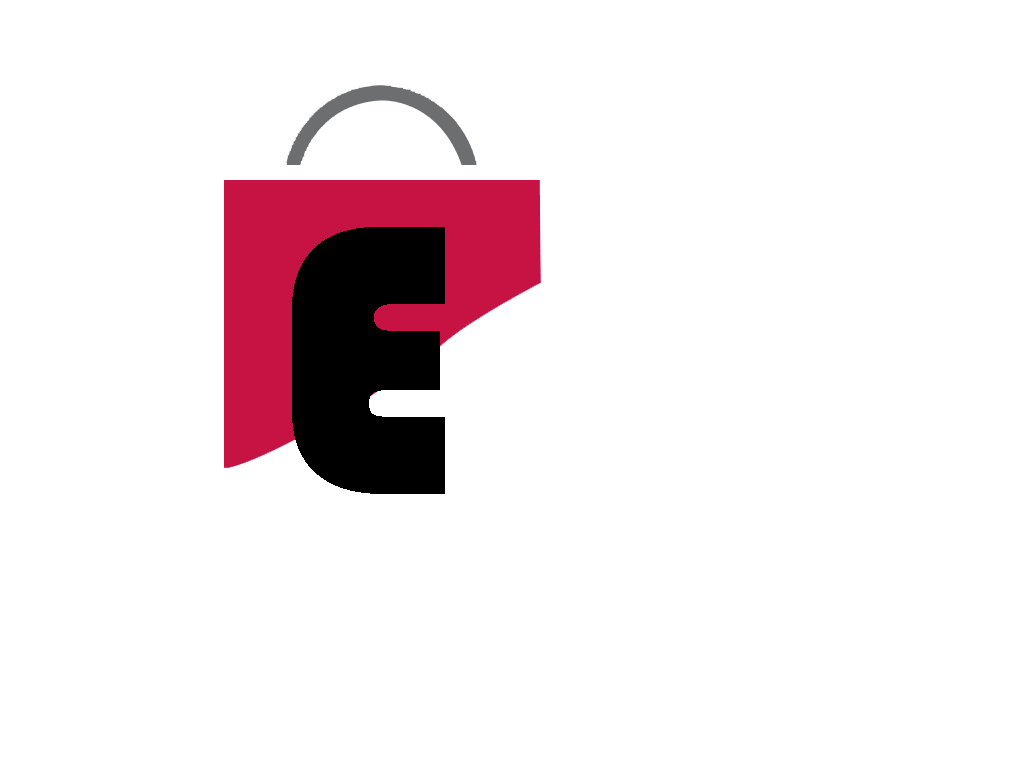
<style>
.page{position:relative;width:1024px;height:768px;background:#ffffff}
.page>*{position:absolute;margin:0}
.t1{font:400px "Bauhaus93";color:#000000}
</style>
<div class="page">
<p class="t1" style="left:292px;top:227px;width:153px;height:267px">E</p>
</div>
